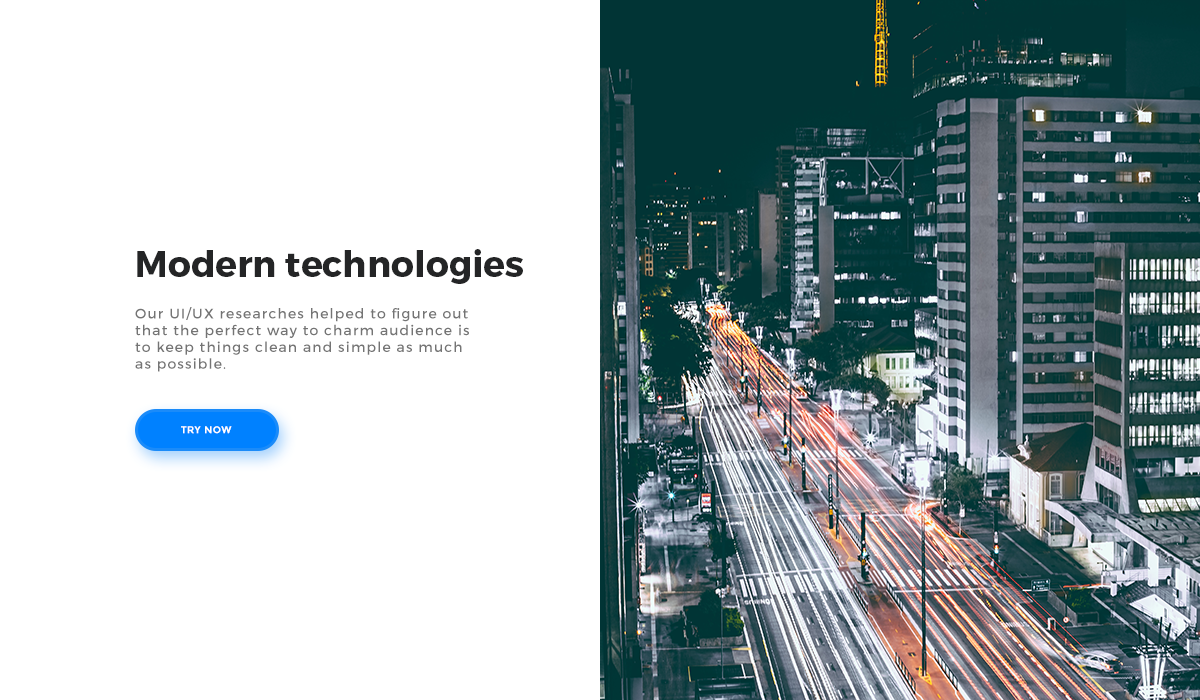
<style>
.page{position:relative;width:1200px;height:700px;background:#ffffff}
.page>*{position:absolute;margin:0}
.t1{font:36px "Montserrat-Bold";color:#242526}
.t2{font:14px "Montserrat-Regular";letter-spacing:0.08em;color:#747474}
.t3{font:10px "Montserrat-Bold";letter-spacing:0.04em;color:#ffffff;text-transform:uppercase}
</style>
<div class="page">
<p class="t1" style="left:137px;top:249px;width:386px;height:35px">Modern technologies</p>
<p class="t2" style="left:135px;top:307px;width:334px;height:65px">Our UI/UX researches helped to figure out that the perfect way to charm audience is to keep things clean and simple as much as possible.</p>
<p class="t3" style="left:181px;top:426px;width:51px;height:8px">TRY NOW</p>
</div>
